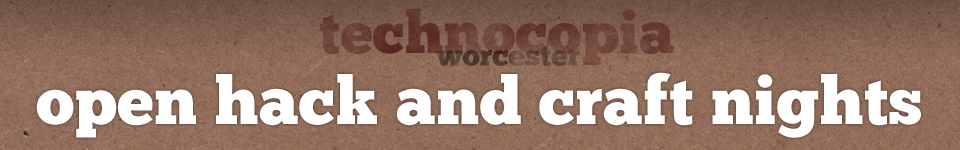
<style>
.page{position:relative;width:960px;height:150px}
.page>*{position:absolute;margin:0}
.t1{font:58.8px "ChunkFive";letter-spacing:0.005em;color:#693f34}
.t2{font:30px "ChunkFive";letter-spacing:0.005em;color:#594236}
.t3{font:66.7px "ChunkFive";letter-spacing:0.005em;color:#ffffff}
</style>
<div class="page">
<p class="t1" style="left:319px;top:8px;width:355px;height:57px">technocopia</p>
<p class="t2" style="left:436px;top:46px;width:144px;height:20px">worcester</p>
<p class="t3" style="left:36px;top:72px;width:885px;height:66px">open hack and craft nights</p>
</div>
